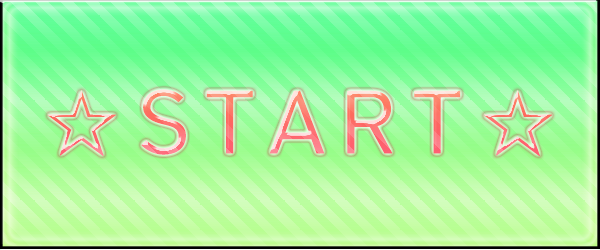
<style>
.page{position:relative;width:600px;height:250px}
.page>*{position:absolute;margin:0}
.t1{font:85px "HCRDotum";letter-spacing:0.15em;font-weight:bold}
</style>
<div class="page">
<p class="t1" style="left:47px;top:89px;width:505px;height:67px">☆START☆</p>
</div>
